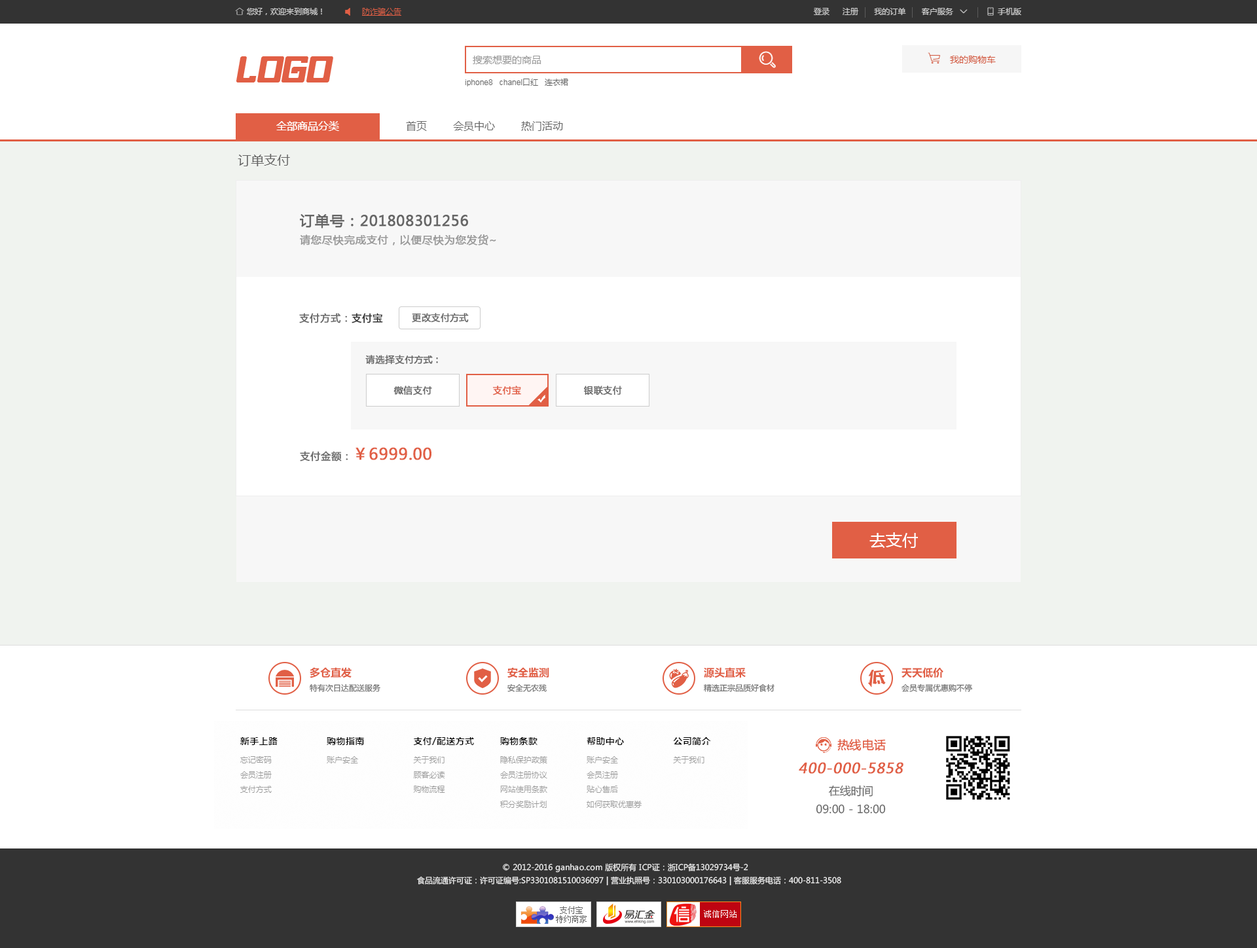
<style>
.page{position:relative;width:1257px;height:948px;background:#ffffff}
.page>*{position:absolute;margin:0}
.t1{font:13.1px "MicrosoftYaHei";color:#666666}
.t2{font:10.5px/17.7px "MicrosoftYaHei";color:#999999;font-weight:bold}
.t3{font:14.4px/17.7px "MicrosoftYaHei";color:#666666;font-weight:bold}
.t4{font:9.8px "MicrosoftYaHei";color:#666666;font-weight:bold}
.t5{font:9.8px "MicrosoftYaHei";color:#333333;font-weight:bold}
.t6{font:9.2px "MicrosoftYaHei";color:#666666;font-weight:bold}
.t7{font:9.2px "MicrosoftYaHei";color:#e15f45;font-weight:bold}
.t8{font:15.7px "MicrosoftYaHei";color:#e15f45;font-weight:bold}
.t9{font:16.4px "MicrosoftYaHei";color:#ffffff}
.t10{font:10.5px "MicrosoftYaHei-Bold";color:#e15f45}
.t11{font:7.9px "MicrosoftYaHei";color:#666666}
.t12{font:11.8px "MicrosoftYaHei";color:#e15f45;font-weight:bold}
.t13{font:14.1px "MicrosoftYaHei";color:#e15f45;font-weight:bold;font-style:italic}
.t14{font:11.1px/18.2px "MicrosoftYaHei";color:#666666}
.t15{font:7.9px/13.1px "MicrosoftYaHei";color:#eeeeee}
</style>
<div class="page">
<p class="t1" style="left:238px;top:154px;width:52px;height:12px">订单支付</p>
<p class="t2" style="left:300px;top:214px;width:196px;height:32px"><span class="t3">订单号：201808301256<br></span>请您尽快完成支付，以便尽快为您发货~</p>
<p class="t4" style="left:299px;top:313px;width:84px;height:11px">支付方式：<span class="t5">支付宝</span></p>
<p class="t6" style="left:412px;top:313px;width:57px;height:10px">更改支付方式</p>
<p class="t6" style="left:365px;top:355px;width:73px;height:10px">请选择支付方式：</p>
<p class="t6" style="left:394px;top:386px;width:38px;height:10px">微信支付</p>
<p class="t7" style="left:493px;top:386px;width:28px;height:10px">支付宝</p>
<p class="t6" style="left:584px;top:386px;width:38px;height:10px">银联支付</p>
<p class="t8" style="left:300px;top:447px;width:132px;height:15px"><span class="t4">支付金额：</span>￥6999.00</p>
<p class="t9" style="left:870px;top:532px;width:48px;height:16px">去支付</p>
<p class="t10" style="left:310px;top:667px;width:42px;height:11px">多仓直发</p>
<p class="t10" style="left:508px;top:667px;width:41px;height:11px">安全监测</p>
<p class="t10" style="left:704px;top:667px;width:42px;height:11px">源头直采</p>
<p class="t10" style="left:902px;top:667px;width:42px;height:11px">天天低价</p>
<p class="t11" style="left:310px;top:684px;width:71px;height:8px">特有次日达配送服务</p>
<p class="t11" style="left:508px;top:684px;width:39px;height:8px">安全无农残</p>
<p class="t11" style="left:704px;top:684px;width:71px;height:8px">精选正宗品质好食材</p>
<p class="t11" style="left:902px;top:684px;width:71px;height:8px">会员专属优惠购不停</p>
<p class="t12" style="left:838px;top:739px;width:48px;height:12px">热线电话</p>
<p class="t13" style="left:799px;top:762px;width:105px;height:12px">400-000-5858</p>
<p class="t14" style="left:816px;top:785px;width:70px;height:29px;text-align:center">在线时间<br>09:00 - 18:00</p>
<p class="t15" style="left:417px;top:863px;width:425px;height:23px;text-align:center">© 2012-2016 ganhao.com 版权所有 ICP证：浙ICP备13029734号-2   <br>食品流通许可证：许可证编号:SP3301081510036097 | 营业执照号：330103000176643 | 客服服务电话：400-811-3508</p>
</div>
